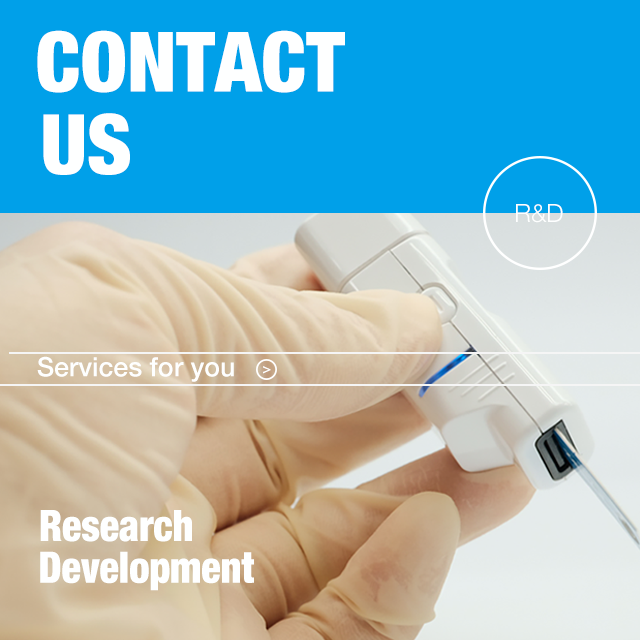
<style>
.page{position:relative;width:640px;height:640px;background:#00a0e9}
.page>*{position:absolute;margin:0}
.t1{font:83.5px "HelveticaNeue-CondensedBlack";color:#feffff}
.t2{font:25.1px "HelveticaNeue-Light";color:#feffff}
.t3{font:26.7px "HelveticaNeue-Medium";color:#feffff}
.t4{font:14.7px "HelveticaNeue-Medium";color:#feffff}
.t5{font:43.4px "HelveticaNeue-CondensedBlack";color:#feffff;scale:0.92 1}
</style>
<div class="page">
<p class="t1" style="left:37px;top:30px;width:308px;height:63px">CONTACT</p>
<p class="t1" style="left:43px;top:113px;width:87px;height:62px">US</p>
<p class="t2" style="left:516px;top:204px;width:47px;height:19px">R&amp;D</p>
<p class="t3" style="left:37px;top:356px;width:197px;height:26px">Services for you</p>
<p class="t4" style="left:263px;top:366px;width:8px;height:8px">&gt;</p>
<p class="t5" style="left:40px;top:510px;width:152px;height:32px">Research</p>
<p class="t5" style="left:40px;top:551px;width:214px;height:40px">Development</p>
</div>
